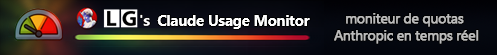
<style>
.page{position:relative;width:497px;height:55px}
.page>*{position:absolute;margin:0}
.t1{font:14.7px "SegoeUI-Bold";letter-spacing:-0.005em;color:#ffffff}
.t2{font:13.8px "SegoeUI";letter-spacing:-0.035em;color:#bbbbbb;font-weight:bold}
</style>
<div class="page">
<p class="t1" style="left:157px;top:15px;width:153px;height:14px">Claude Usage Monitor</p>
<p class="t2" style="left:334px;top:13px;width:145px;height:31px;text-align:center">moniteur de quotas <br>Anthropic en temps réel</p>
</div>
